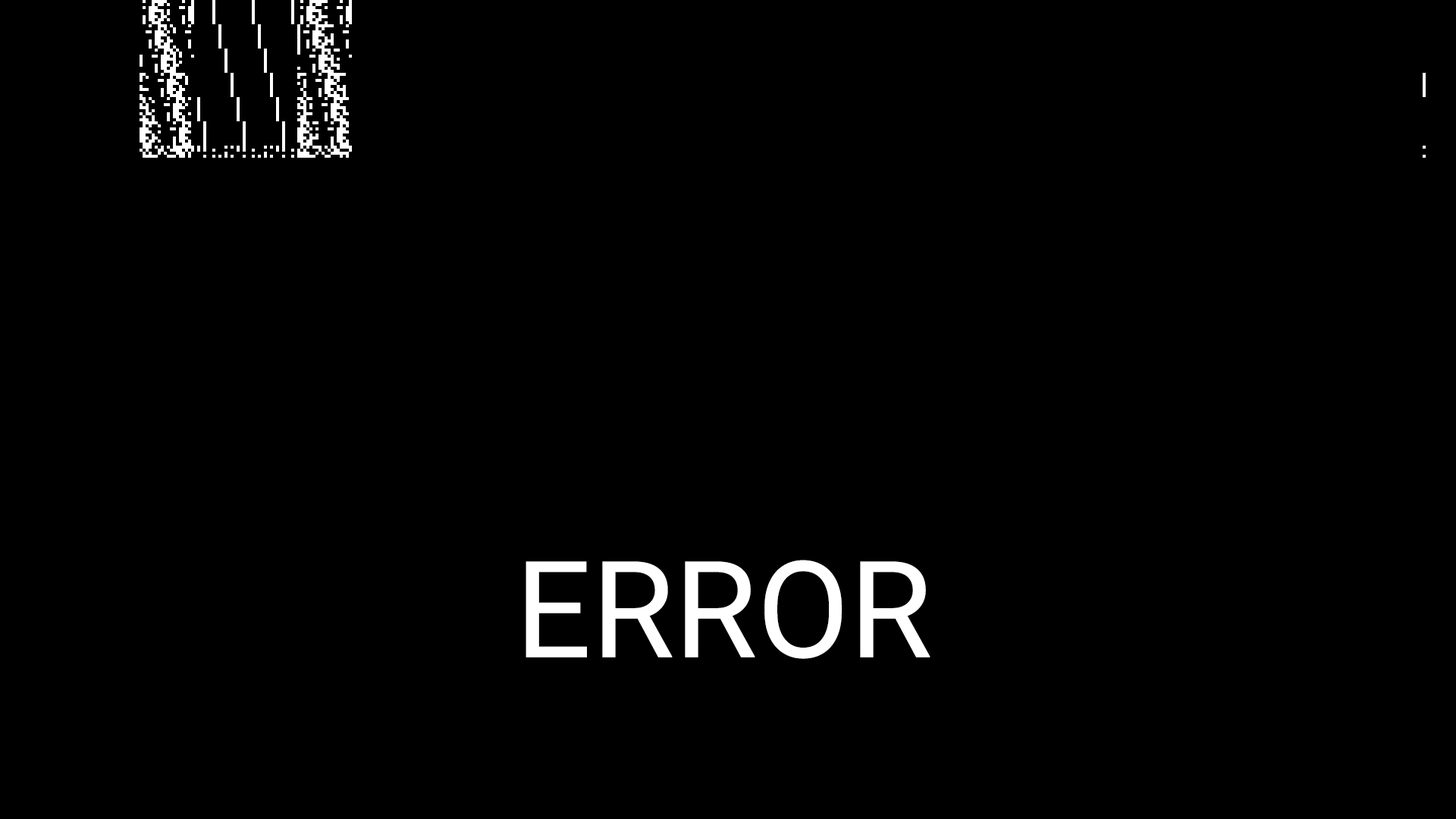
<style>
.page{position:relative;width:1456px;height:819px;background:#000000}
.page>*{position:absolute;margin:0}
.t1{font:134.4px "Roboto-Regular";color:#ffffff}
</style>
<div class="page">
<p class="t1" style="left:526px;top:560px;width:404px;height:99px">ERROR</p>
</div>
